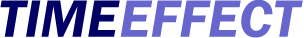
<style>
.page{position:relative;width:304px;height:38px;background:#ffffff}
.page>*{position:absolute;margin:0}
.t1{font:54.2px "FranklinGothic-DemiItalic";color:#000066}
.t2{font:54.2px "FranklinGothic-DemiItalic";color:#6666cc}
</style>
<div class="page">
<p class="t1" style="left:0px;top:0px;width:120px;height:37px">TIME</p>
<p class="t2" style="left:120px;top:0px;width:183px;height:38px">EFFECT</p>
</div>
